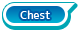
<style>
.page{position:relative;width:80px;height:32px;background:#ffffff}
.page>*{position:absolute;margin:0}
.t1{font:11px "JK-Gothic-M";color:#ffffff}
</style>
<div class="page">
<p class="t1" style="left:20px;top:10px;width:30px;height:9px">Chest</p>
</div>
